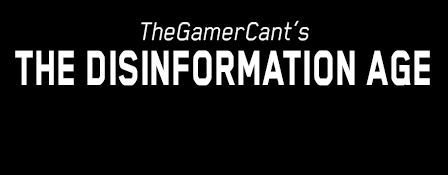
<style>
.page{position:relative;width:448px;height:175px;background:#000000}
.page>*{position:absolute;margin:0}
.t1{font:29.3px "BlenderPro-BookItalic";color:#ffffff;scale:0.89 1}
.t2{font:57px "BlenderPro-Heavy";color:#ffffff;scale:0.69 1}
</style>
<div class="page">
<p class="t1" style="left:141px;top:20px;width:168px;height:21px">TheGamerCant’s</p>
<p class="t2" style="left:15px;top:50px;width:415px;height:36px">THE DISINFORMATION AGE</p>
</div>
